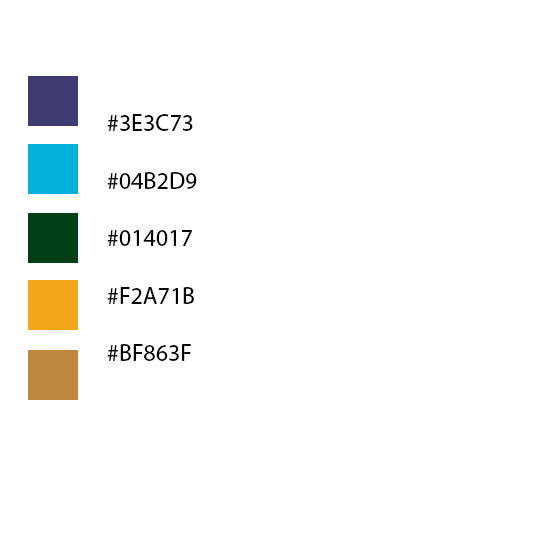
<style>
.page{position:relative;width:550px;height:550px;background:#ffffff}
.page>*{position:absolute;margin:0}
.t1{font:24px "MyriadPro-Regular";color:#000000}
</style>
<div class="page">
<p class="t1" style="left:107px;top:114px;width:90px;height:247px">#3E3C73<br><br>#04B2D9<br><br>#014017<br><br>#F2A71B<br><br>#BF863F</p>
</div>
